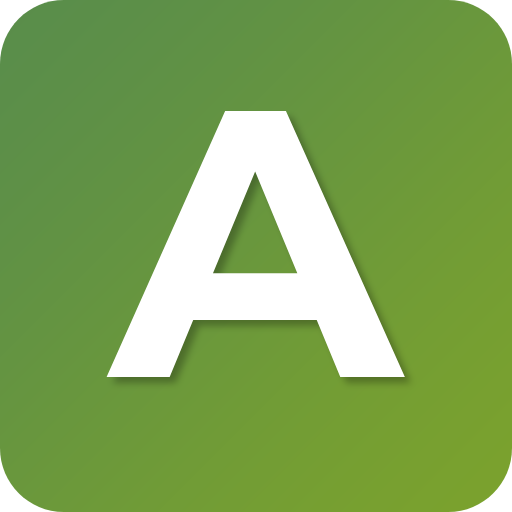
<style>
.page{position:relative;width:512px;height:512px}
.page>*{position:absolute;margin:0}
.t1{font:380px "Montserrat-Bold";color:#ffffff}
</style>
<div class="page">
<p class="t1" style="left:106px;top:111px;width:299px;height:266px">A</p>
</div>
